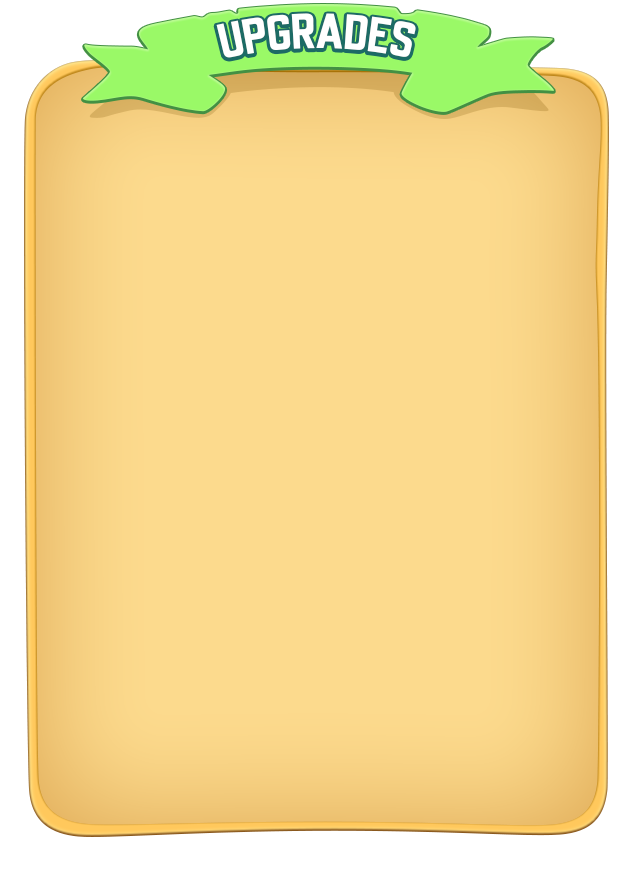
<style>
.page{position:relative;width:634px;height:872px;background:#fcda8d}
.page>*{position:absolute;margin:0}
.t1{font:44.3px "UniversalKnowledge";letter-spacing:-0.02em;color:#ffffff;scale:1.03 1}
</style>
<div class="page">
<p class="t1" style="left:216px;top:13px;width:200px;height:45px">UPGRADES</p>
</div>
